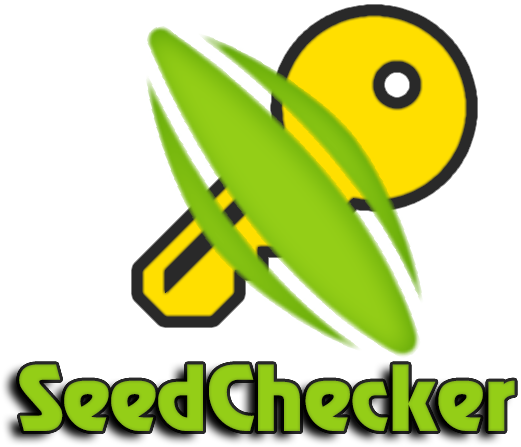
<style>
.page{position:relative;width:521px;height:447px;background:#ffffff}
.page>*{position:absolute;margin:0}
.t1{font:81px "Revue";color:#94ce17}
</style>
<div class="page">
<p class="t1" style="left:19px;top:364px;width:496px;height:67px">SeedChecker</p>
</div>
